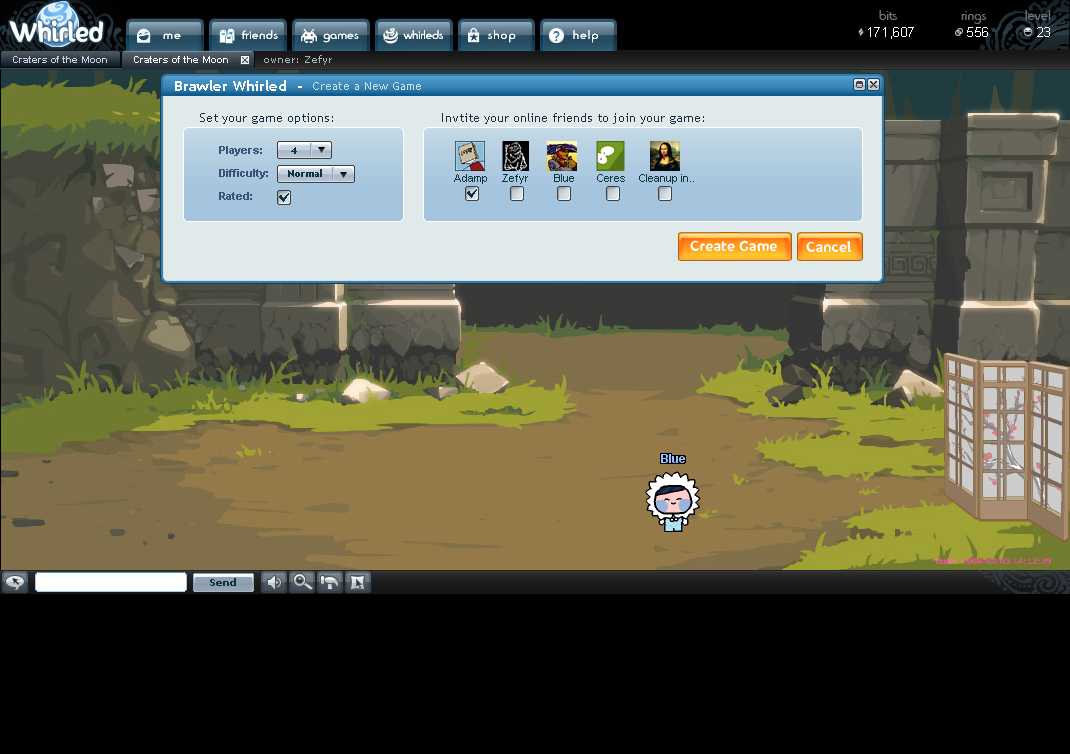
<style>
.page{position:relative;width:1070px;height:754px;background:#000000}
.page>*{position:absolute;margin:0}
.t1{font:14px "BlippoLightSF";letter-spacing:0.015em;color:#6a787c}
.t2{font:22.8px "SunnySide";color:#ffffff}
.t3{font:12px "BlippoLightSF";letter-spacing:0.1em;color:#ffffff;scale:1.07 1}
.t4{font:12px "BlippoLightSF";letter-spacing:0.05em;color:#ffffff;scale:1.07 1}
.t5{font:12px "BlippoLightSF";letter-spacing:0.025em;color:#ffffff;scale:1.07 1}
.t6{font:12px "BlippoLightSF";color:#ffffff;scale:1.07 1}
.t7{font:13px "ArialMT";letter-spacing:0.025em;color:#ffffff}
.t8{font:14px "TrebuchetMS-Bold";color:#ffffff;scale:1.07 1}
.t9{font:11px "TrebuchetMS";color:#cfe3e5;scale:1.07 1}
.t10{font:12px "TrebuchetMS";color:#1e2e3e;scale:1.07 1}
.t11{font:12px "SunnySide";letter-spacing:0.05em;color:#ffffff;scale:1.07 1}
</style>
<div class="page">
<p class="t1" style="left:879px;top:10px;width:172px;height:14px">bits               rings         level</p>
<p class="t2" style="left:9px;top:20px;width:94px;height:22px">Whirled</p>
<p class="t2" style="left:9px;top:20px;width:94px;height:22px">Whirled</p>
<p class="t3" style="left:163px;top:30px;width:435px;height:13px">me                <span class="t4">friends            </span><span class="t5">games</span><span class="t6">            whirleds            </span>shop               help</p>
<p class="t3" style="left:163px;top:30px;width:435px;height:13px">me                <span class="t4">friends            </span><span class="t5">games</span><span class="t6">            whirleds            </span>shop               help</p>
<p class="t7" style="left:868px;top:27px;width:182px;height:12px">171,607            556           23</p>
<p class="t8" style="left:175px;top:80px;width:127px;height:11px">Brawler Whirled  -</p>
<p class="t8" style="left:175px;top:80px;width:127px;height:11px">Brawler Whirled  -</p>
<p class="t9" style="left:313px;top:82px;width:108px;height:8px">Create a New Game</p>
<p class="t10" style="left:200px;top:113px;width:133px;height:11px">Set your game options:</p>
<p class="t10" style="left:442px;top:113px;width:262px;height:11px">Invtite your online friends to join your game:</p>
<p class="t11" style="left:690px;top:240px;width:87px;height:12px">Create Game</p>
<p class="t11" style="left:806px;top:241px;width:46px;height:12px">Cancel</p>
</div>
